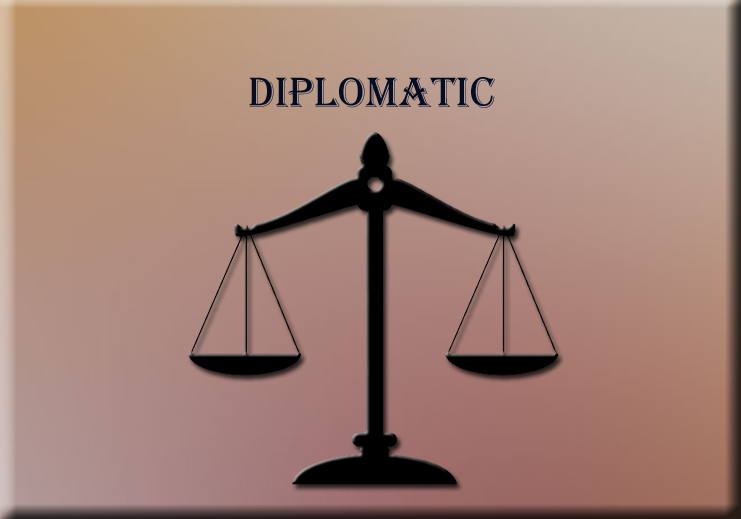
<style>
.page{position:relative;width:741px;height:519px}
.page>*{position:absolute;margin:0}
.t1{font:44px "Algerian";color:#020d26}
</style>
<div class="page">
<p class="t1" style="left:249px;top:77px;width:246px;height:31px">Diplomatic</p>
</div>
